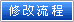
<style>
.page{position:relative;width:74px;height:22px}
.page>*{position:absolute;margin:0}
.t1{font:12px "SimSun";letter-spacing:0.2em;color:#ffffff}
</style>
<div class="page">
<p class="t1" style="left:9px;top:5px;width:54px;height:11px">修改流程</p>
</div>
